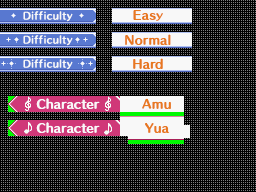
<style>
.page{position:relative;width:256px;height:192px;background:#000000}
.page>*{position:absolute;margin:0}
.t1{font:9.3px "HummingStd-B";letter-spacing:0.04em;color:#f8f8f8}
.t2{font:8.4px "HummingStd-B";letter-spacing:0.04em;color:#f8f8f8;scale:1.11 1}
.t3{font:11.3px/24px "HummingStd-E";letter-spacing:0.025em;color:#e87820}
.t4{font:9.1px/24px "HummingStd-E";letter-spacing:0.025em;color:#e87820;scale:1.25 1}
.t5{font:11.3px/24px "HummingStd-E";color:#e87820}
.t6{font:11.3px/24px "HummingStd-E";letter-spacing:0.025em;color:#f8f8f8}
</style>
<div class="page">
<p class="t1" style="left:23px;top:11px;width:50px;height:11px">Diff icult<span class="t2">y</span></p>
<p class="t3" style="left:125px;top:10px;width:46px;height:59px;text-align:center">Eas<span class="t4">y<br></span>Normal<br>Ha<span class="t5">r</span>d</p>
<p class="t1" style="left:23px;top:35px;width:50px;height:11px">Diff icult<span class="t2">y</span></p>
<p class="t1" style="left:23px;top:59px;width:50px;height:11px">Diff icult<span class="t2">y</span></p>
<p class="t6" style="left:36px;top:98px;width:64px;height:35px;text-align:center">Character<br>Character</p>
<p class="t3" style="left:142px;top:98px;width:29px;height:35px;text-align:center">Amu<br>Yua</p>
</div>
